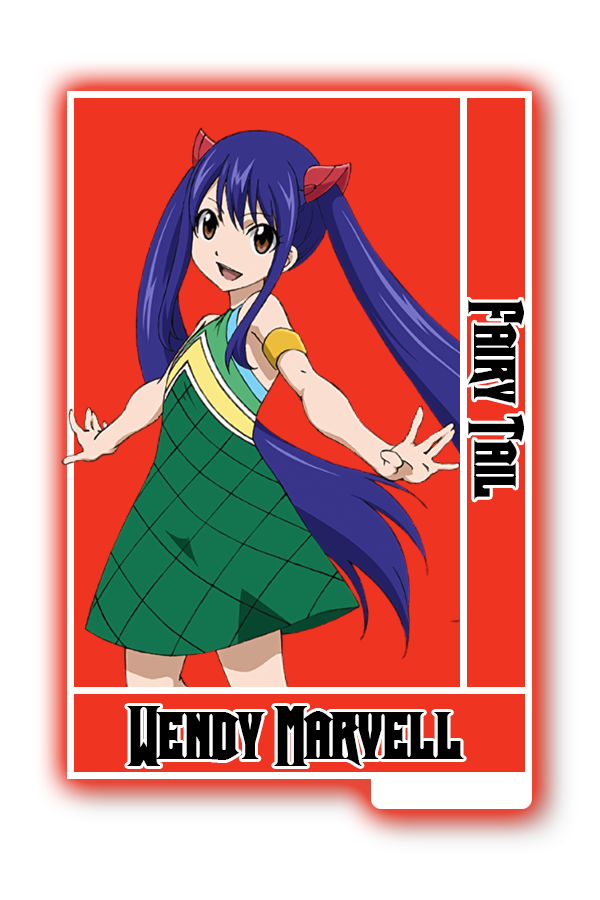
<style>
.page{position:relative;width:600px;height:900px;background:#ffffff}
.page>*{position:absolute;margin:0}
.t1{font:61.5px "Crown-Title";color:#000000}
.t2{font:70.1px "Crown-Title";color:#000000}
</style>
<div class="page">
<p class="t1" style="left:468px;top:299px;width:56px;height:201px;rotate:90deg">Fairy Tail</p>
<p class="t2" style="left:127px;top:706px;width:337px;height:60px">Wendy Marvell</p>
</div>
